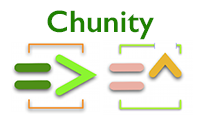
<style>
.page{position:relative;width:200px;height:124px;background:#ffffff}
.page>*{position:absolute;margin:0}
.t1{font:31.2px "GillSans-SemiBold";color:#1f8200}
</style>
<div class="page">
<p class="t1" style="left:47px;top:10px;width:107px;height:30px">Chunity</p>
</div>
